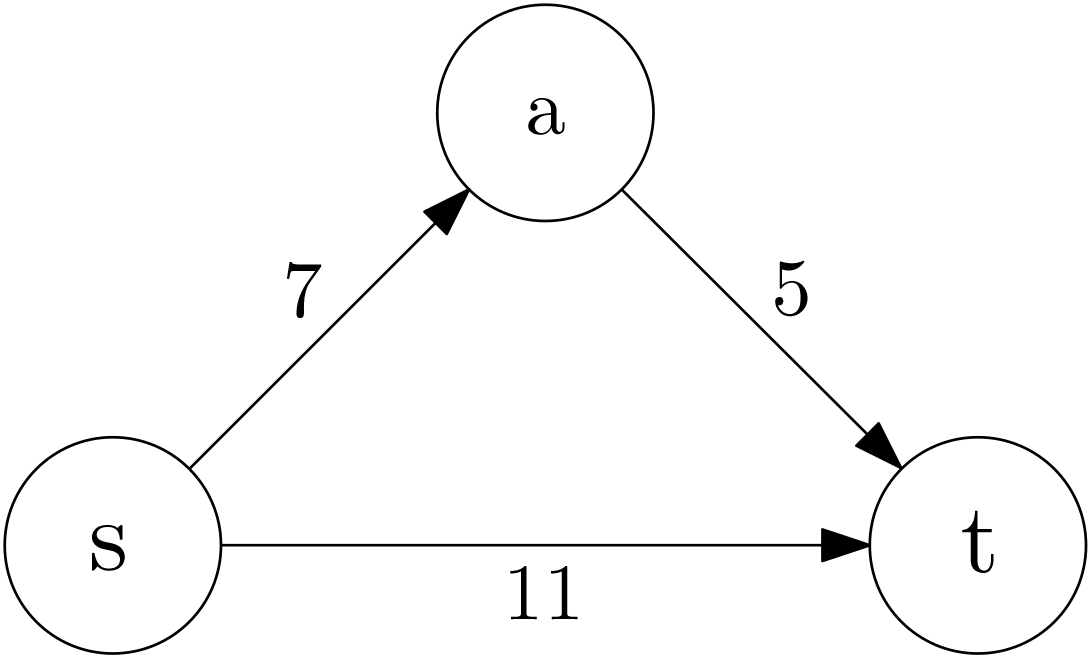
<style>
.page{position:relative;width:1091px;height:659px;background:#ffffff}
.page>*{position:absolute;margin:0}
.t1{font:80px "CMUSerif-Roman";letter-spacing:0.01em;color:#000000}
.t2{font:100px "CMUSerif-Roman";letter-spacing:0.01em;color:#000000}
</style>
<div class="page">
<p class="t1" style="left:528px;top:98px;width:37px;height:37px">a</p>
<p class="t1" style="left:287px;top:262px;width:35px;height:56px">7</p>
<p class="t1" style="left:775px;top:260px;width:33px;height:57px">5</p>
<p class="t2" style="left:962px;top:510px;width:32px;height:63px">t</p>
<p class="t2" style="left:92px;top:525px;width:33px;height:46px">s</p>
<p class="t1" style="left:510px;top:566px;width:68px;height:54px">11</p>
</div>
